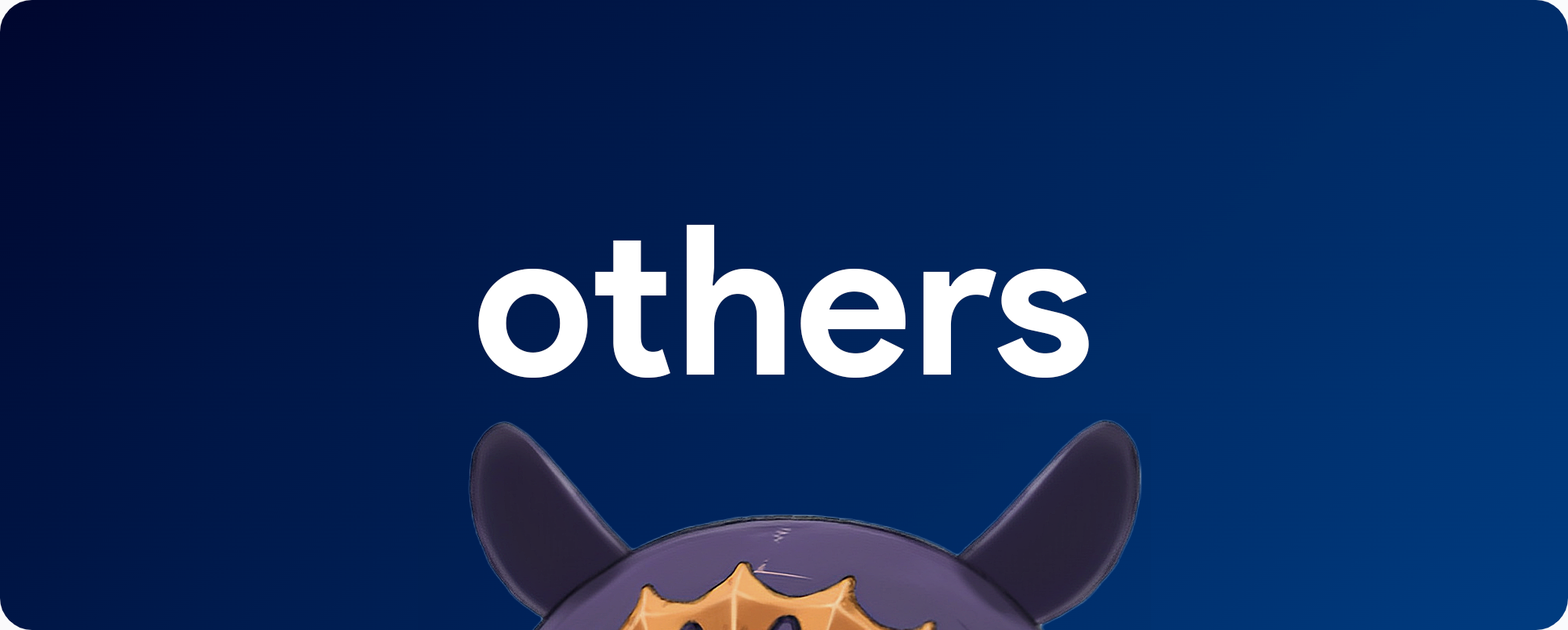
<style>
.page{position:relative;width:1568px;height:630px}
.page>*{position:absolute;margin:0}
.t1{font:209.2px "ProductSans-Bold";color:#ffffff}
</style>
<div class="page">
<p class="t1" style="left:478px;top:224px;width:611px;height:154px">others</p>
</div>
